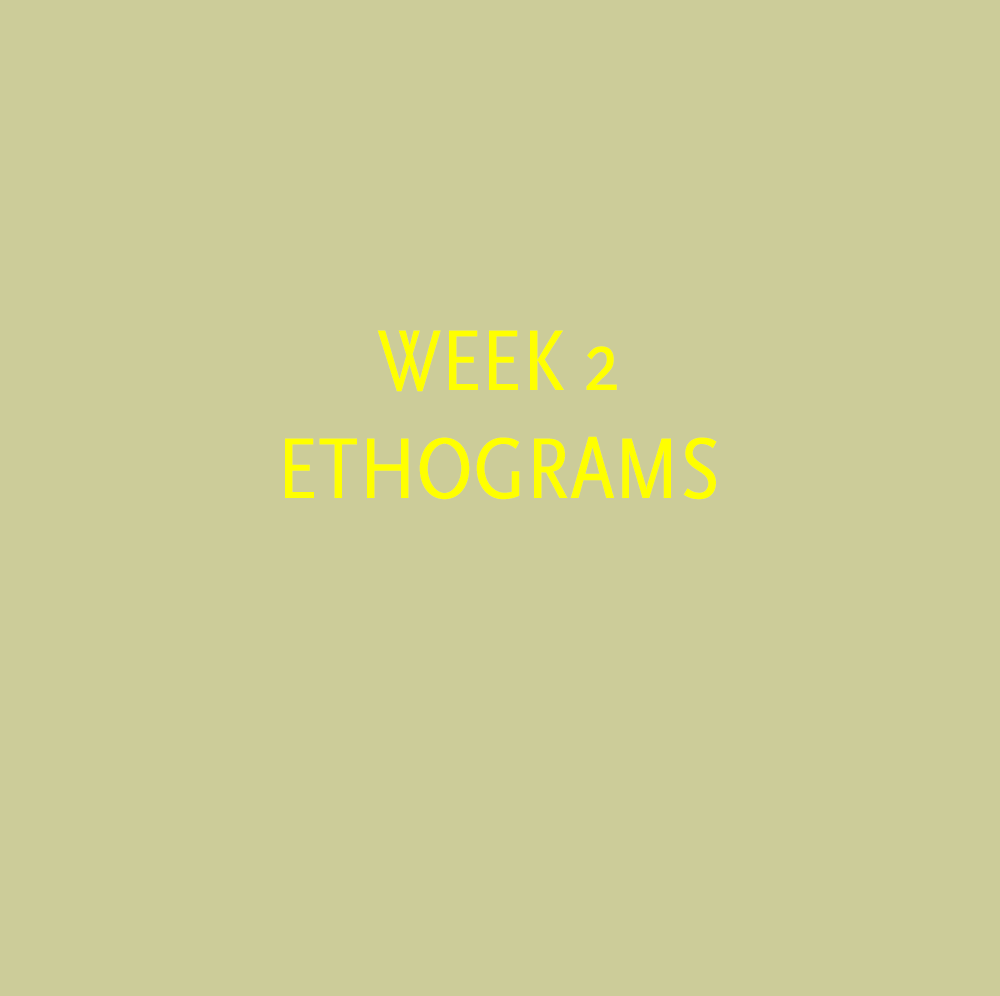
<style>
.page{position:relative;width:1000px;height:996px;background:#cccc99}
.page>*{position:absolute;margin:0}
.t1{font:90px "ScalaSansPro-Cond";color:#ffff00}
</style>
<div class="page">
<p class="t1" style="left:285px;top:330px;width:432px;height:170px;text-align:center">WEEK 2<br>ETHOGRAMS</p>
</div>
